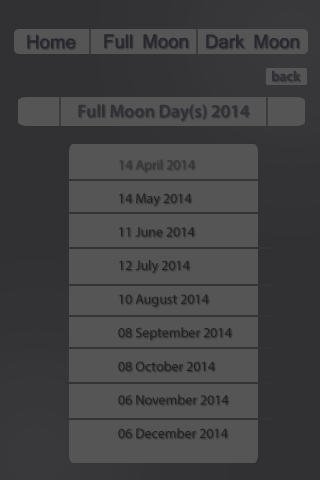
<style>
.page{position:relative;width:320px;height:480px;background:#555556}
.page>*{position:absolute;margin:0}
.t1{font:18px "Mangal";color:#272730}
.t2{font:14px "MyriadPro-Semibold";color:#303037}
.t3{font:18px "MyriadPro-Semibold";color:#303037}
.t4{font:14px "MyriadPro-Regular";color:#212121}
.t5{font:14px "MyriadPro-Regular";color:#38383b}
</style>
<div class="page">
<p class="t1" style="left:27px;top:34px;width:49px;height:15px">Home</p>
<p class="t1" style="left:104px;top:34px;width:84px;height:15px">Full Moon</p>
<p class="t1" style="left:206px;top:34px;width:93px;height:15px">Dark Moon</p>
<p class="t2" style="left:272px;top:70px;width:29px;height:12px">back</p>
<p class="t3" style="left:78px;top:104px;width:171px;height:17px">Full Moon Day(s) 2014</p>
<p class="t4" style="left:118px;top:159px;width:114px;height:279px"><span class="t5"><br>    14 April 2014<br><br>    </span>14 May 2014<br><br>    11 June 2014<br><br>    12 July 2014<br><br>    10 August 2014<br><br>    08 September 2014<br><br>    08 October 2014<br><br>    06 November 2014<br><br>    06 December 2014</p>
</div>
